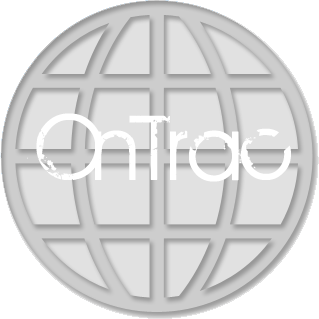
<style>
.page{position:relative;width:319px;height:319px;background:#e1e1e1}
.page>*{position:absolute;margin:0}
.t1{font:100px "BIRTHOFAHERO";color:#ffffff}
</style>
<div class="page">
<p class="t1" style="left:27px;top:113px;width:264px;height:69px">OnTrac</p>
</div>
